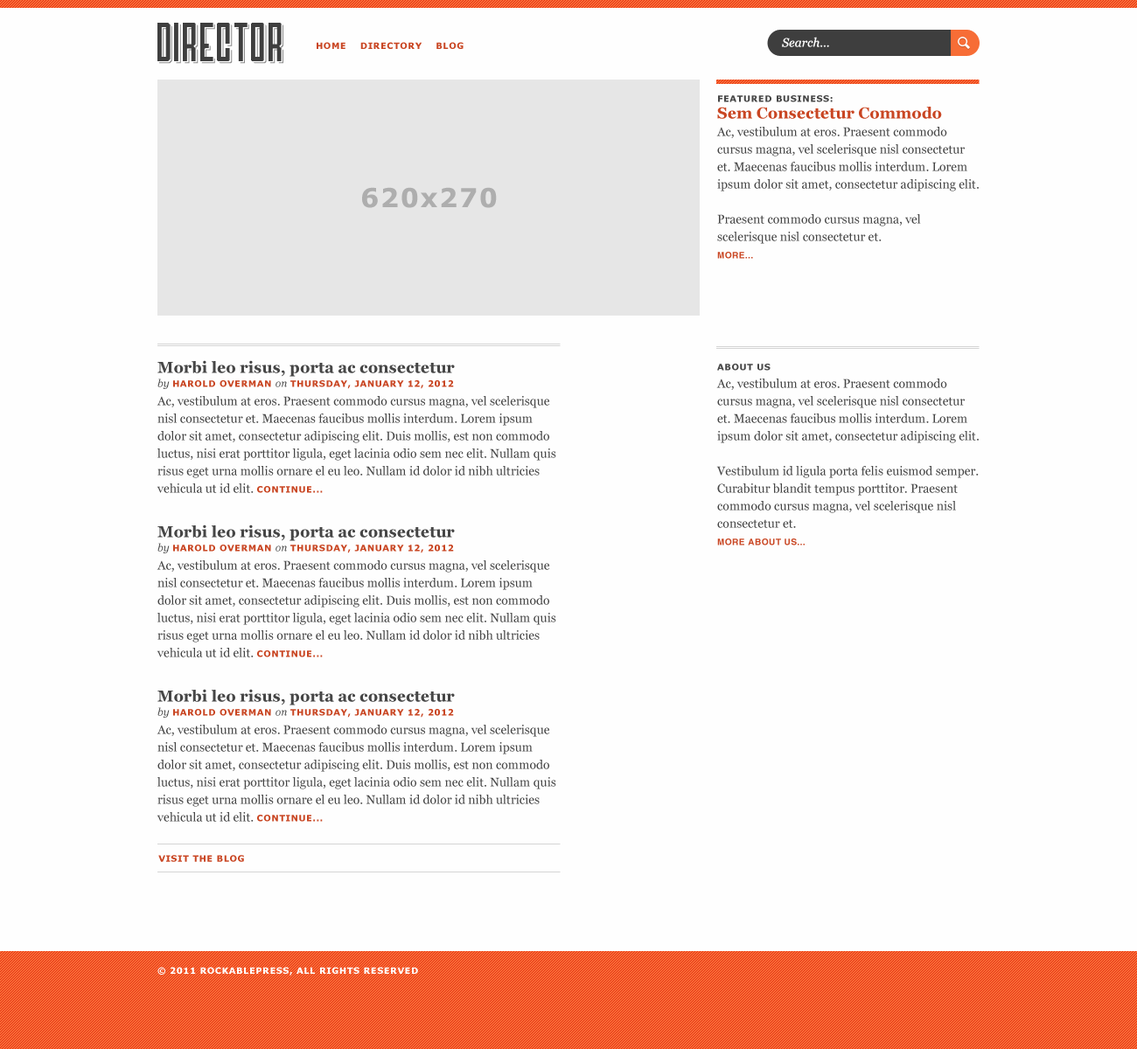
<style>
.page{position:relative;width:1137px;height:1049px;background:#fefefe}
.page>*{position:absolute;margin:0}
.t1{font:38.4px "Airship27";color:#3e3e3e}
.t2{font:38.4px "Airship27"}
.t3{font:8.7px "Verdana-Bold";letter-spacing:0.05em;color:#c94623}
.t4{font:12.2px "Georgia-Italic";color:#fefefe}
.t5{font:12.2px/17.5px "Georgia";color:#464646}
.t6{font:8.7px/16.6px "Verdana-Bold";letter-spacing:0.05em;color:#464646}
.t7{font:15.7px/16.6px "Georgia-Bold";color:#c94623}
.t8{font:8.7px/17.5px "Helvetica-Bold";letter-spacing:0.05em;color:#c94623}
.t9{font:26.2px "Verdana-Bold";letter-spacing:0.05em;color:#aeaeae}
.t10{font:15.7px/16.6px "Georgia-Bold";color:#464646}
.t11{font:10.5px/14px "Georgia-Italic";color:#464646}
.t12{font:8.7px/14px "Verdana-Bold";letter-spacing:0.05em;color:#c94623}
.t13{font:12.2px/18.4px "Georgia";color:#464646}
.t14{font:8.7px/17.5px "Verdana-Bold";letter-spacing:0.05em;color:#c94623}
.t15{font:8.7px "Verdana-Bold";letter-spacing:0.05em;color:#ffffff}
</style>
<div class="page">
<p class="t1" style="left:157px;top:23px;width:125px;height:38px">DirectOr</p>
<p class="t2" style="left:158px;top:24px;width:124px;height:39px">DirectOr</p>
<p class="t3" style="left:316px;top:42px;width:147px;height:7px">HOME    DIRECTORY    BLOG</p>
<p class="t4" style="left:782px;top:37px;width:47px;height:10px">Search...</p>
<p class="t5" style="left:716px;top:95px;width:262px;height:164px"><span class="t6">FEATURED BUSINESS:<br></span><span class="t7">Sem Consectetur Commodo<br></span>Ac, vestibulum at eros. Praesent commodo cursus magna, vel scelerisque nisl consectetur et. Maecenas faucibus mollis interdum. Lorem ipsum dolor sit amet, consectetur adipiscing elit.<br><br>Praesent commodo cursus magna, vel scelerisque nisl consectetur et.<br><span class="t8">MORE...</span></p>
<p class="t9" style="left:362px;top:187px;width:135px;height:21px">620x270</p>
<p class="t5" style="left:156px;top:360px;width:400px;height:133px"><span class="t10">Morbi leo risus, porta ac consectetur<br></span><span class="t11">by </span><span class="t12">HAROLD OVERMAN </span><span class="t11">on </span><span class="t12">THURSDAY, JANUARY 12, 2012<br></span><span class="t13">Ac, vestibulum at eros. Praesent commodo cursus magna, vel scelerisque </span>nisl consectetur et. Maecenas faucibus mollis interdum. Lorem ipsum dolor sit amet, consectetur adipiscing elit. Duis mollis, est non commodo luctus, nisi erat porttitor ligula, eget lacinia odio sem nec elit. Nullam quis risus eget urna mollis ornare el eu leo. Nullam id dolor id nibh ultricies vehicula ut id elit. <span class="t14">CONTINUE...</span></p>
<p class="t5" style="left:716px;top:364px;width:262px;height:182px"><span class="t6">ABOUT US<br></span>Ac, vestibulum at eros. Praesent commodo cursus magna, vel scelerisque nisl consectetur et. Maecenas faucibus mollis interdum. Lorem ipsum dolor sit amet, consectetur adipiscing elit.<br><br>Vestibulum id ligula porta felis euismod semper. Curabitur blandit tempus porttitor. Praesent commodo cursus magna, vel scelerisque nisl consectetur et.<br><span class="t8">MORE ABOUT US...</span></p>
<p class="t5" style="left:156px;top:525px;width:400px;height:132px"><span class="t10">Morbi leo risus, porta ac consectetur<br></span><span class="t11">by </span><span class="t12">HAROLD OVERMAN </span><span class="t11">on </span><span class="t12">THURSDAY, JANUARY 12, 2012<br></span><span class="t13">Ac, vestibulum at eros. Praesent commodo cursus magna, vel scelerisque </span>nisl consectetur et. Maecenas faucibus mollis interdum. Lorem ipsum dolor sit amet, consectetur adipiscing elit. Duis mollis, est non commodo luctus, nisi erat porttitor ligula, eget lacinia odio sem nec elit. Nullam quis risus eget urna mollis ornare el eu leo. Nullam id dolor id nibh ultricies vehicula ut id elit. <span class="t14">CONTINUE...</span></p>
<p class="t5" style="left:156px;top:689px;width:400px;height:133px"><span class="t10">Morbi leo risus, porta ac consectetur<br></span><span class="t11">by </span><span class="t12">HAROLD OVERMAN </span><span class="t11">on </span><span class="t12">THURSDAY, JANUARY 12, 2012<br></span><span class="t13">Ac, vestibulum at eros. Praesent commodo cursus magna, vel scelerisque </span>nisl consectetur et. Maecenas faucibus mollis interdum. Lorem ipsum dolor sit amet, consectetur adipiscing elit. Duis mollis, est non commodo luctus, nisi erat porttitor ligula, eget lacinia odio sem nec elit. Nullam quis risus eget urna mollis ornare el eu leo. Nullam id dolor id nibh ultricies vehicula ut id elit. <span class="t14">CONTINUE...</span></p>
<p class="t3" style="left:158px;top:855px;width:86px;height:7px">VISIT THE BLOG</p>
<p class="t15" style="left:157px;top:967px;width:261px;height:9px">© 2011 ROCKABLEPRESS, ALL RIGHTS RESERVED</p>
</div>
